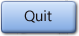
<style>
.page{position:relative;width:79px;height:36px}
.page>*{position:absolute;margin:0}
.t1{font:14.7px "SegoeUI";color:#171111}
</style>
<div class="page">
<p class="t1" style="left:24px;top:10px;width:28px;height:13px">Quit</p>
</div>
